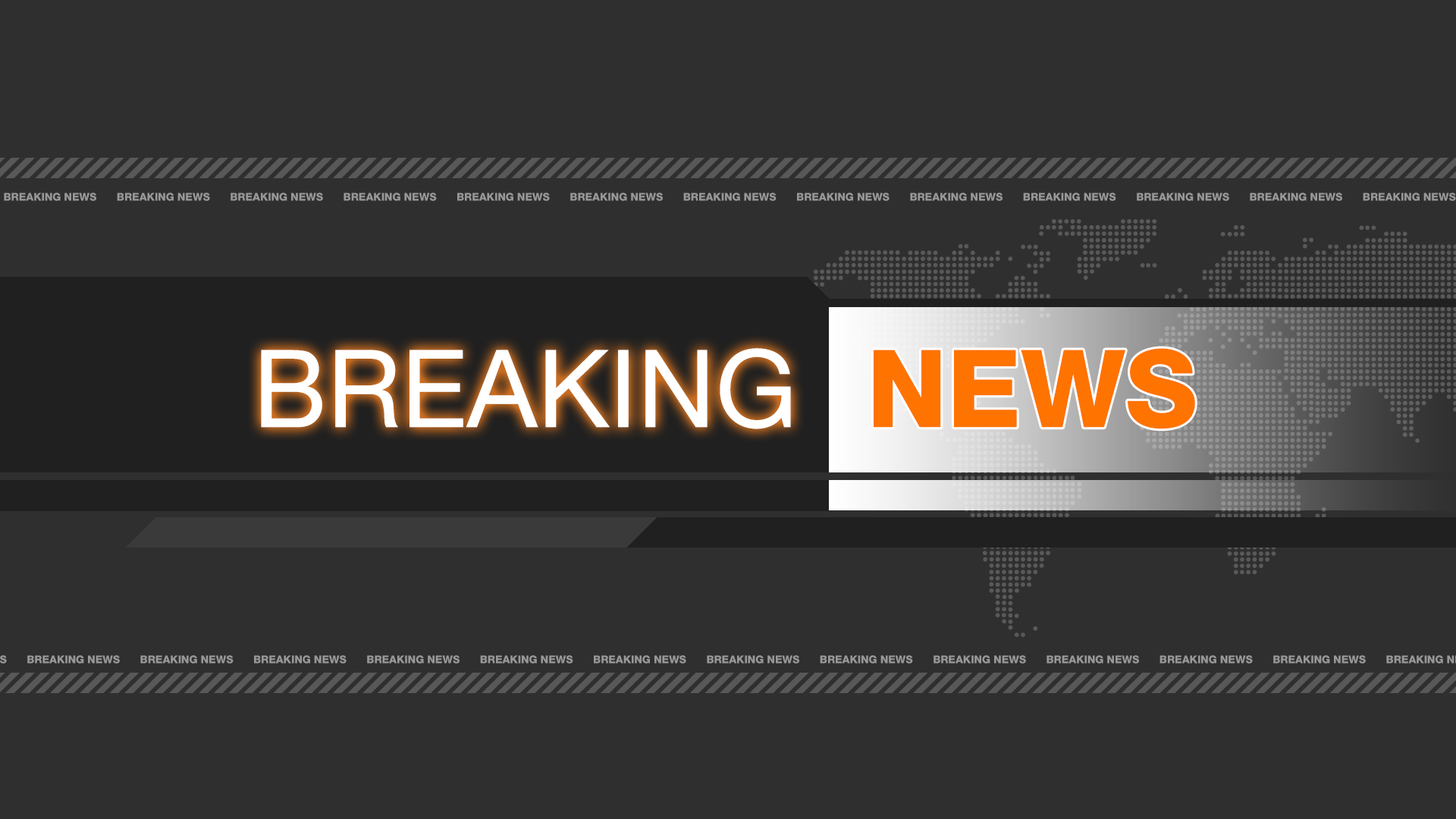
<style>
.page{position:relative;width:1456px;height:819px;background:#2f2f2f}
.page>*{position:absolute;margin:0}
.t1{font:107.8px "HelveticaNeueLTStd-Roman";color:#ffffff}
.t2{font:107.8px "HelveticaNeueLTStd-Hv";color:#ff7300}
</style>
<div class="page">
<p class="t1" style="left:261px;top:348px;width:530px;height:81px">BREAKING</p>
<p class="t2" style="left:874px;top:348px;width:321px;height:81px">NEWS</p>
</div>
